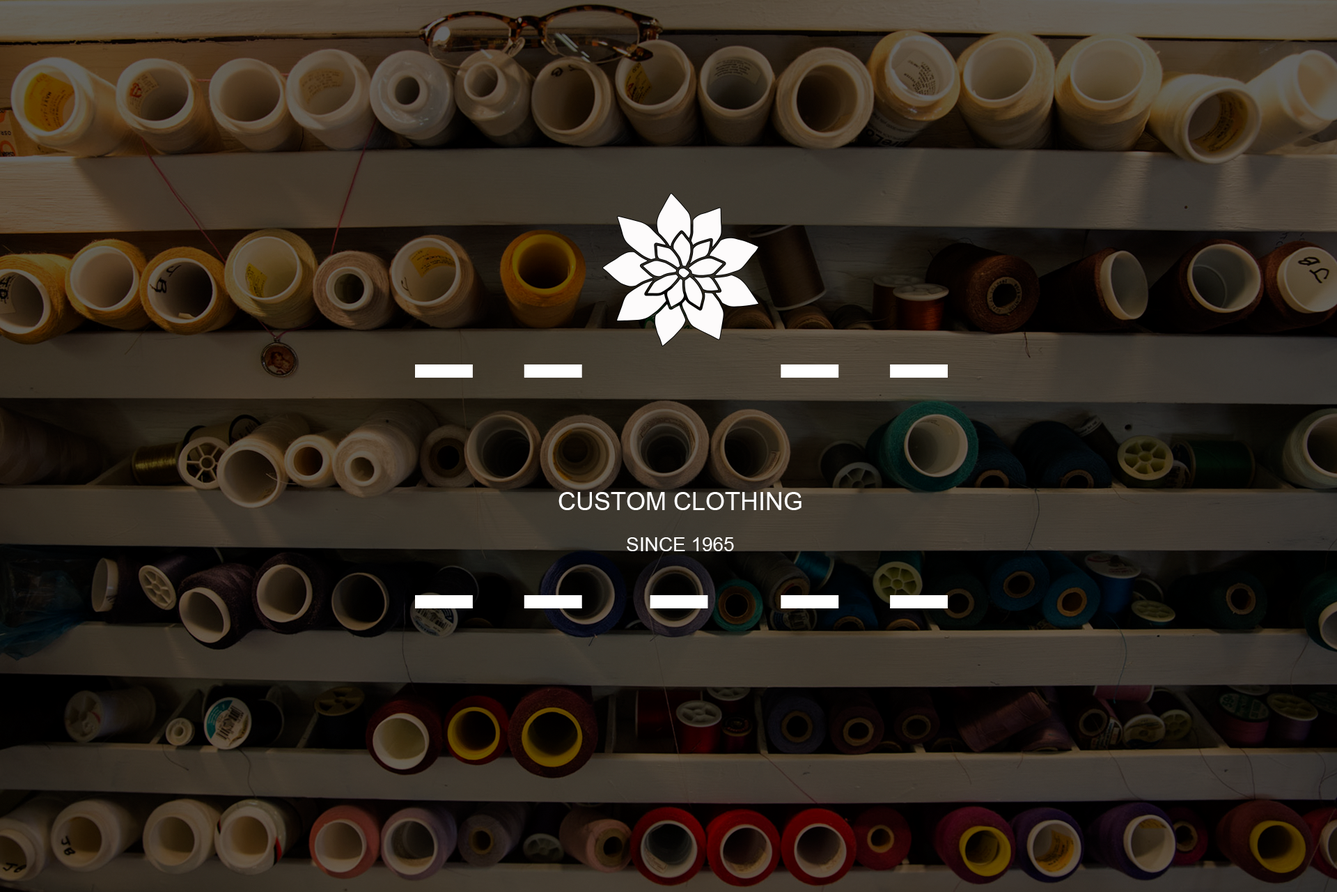
<style>
.page{position:relative;width:1337px;height:892px}
.page>*{position:absolute;margin:0}
.t1{font:25.1px "ArialMT";color:#ffffff}
.t2{font:19.5px "ArialMT";color:#ffffff}
</style>
<div class="page">
<p class="t1" style="left:559px;top:492px;width:243px;height:59px;text-align:center">CUSTOM CLOTHING<br><br><span class="t2">SINCE 1965</span></p>
</div>
